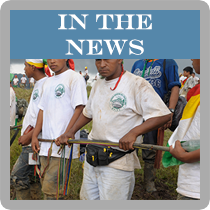
<style>
.page{position:relative;width:210px;height:210px}
.page>*{position:absolute;margin:0}
.t1{font:21.1px "EngraversMT";color:#ffffff}
</style>
<div class="page">
<p class="t1" style="left:58px;top:14px;width:94px;height:41px;text-align:center">in the <br>news</p>
</div>
